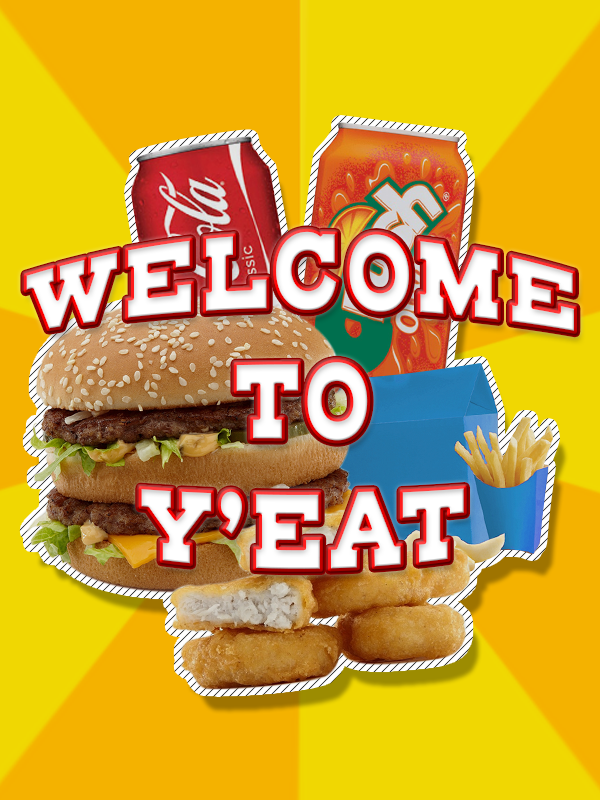
<style>
.page{position:relative;width:600px;height:800px;background:#f4b200}
.page>*{position:absolute;margin:0}
.t1{font:83.3px "HendersonSlabBasicBlack";color:#ffffff}
</style>
<div class="page">
<p class="t1" style="left:25px;top:230px;width:551px;height:341px;text-align:center">WELCOME<br>TO<br>Y’EAT</p>
</div>
